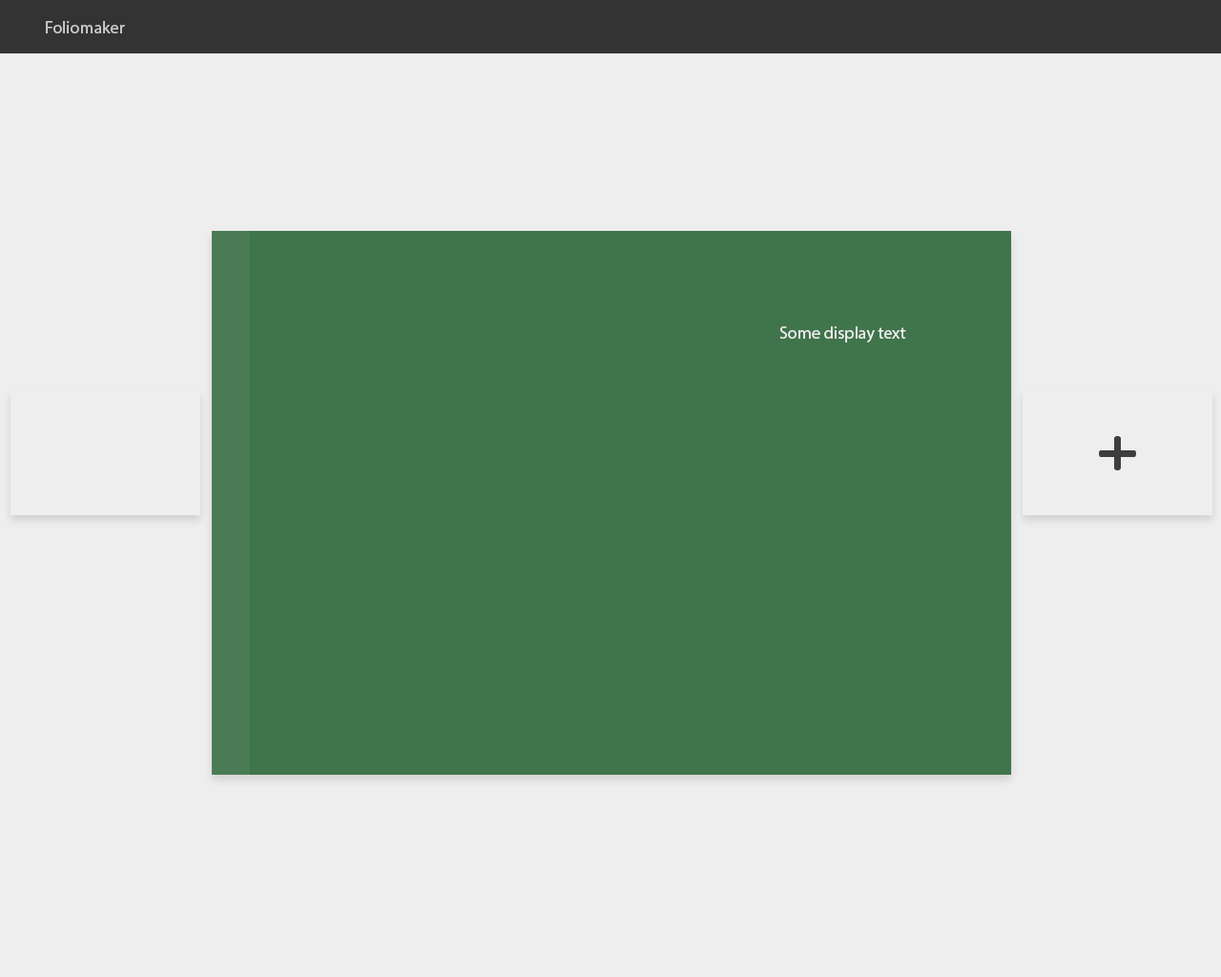
<style>
.page{position:relative;width:1221px;height:977px;background:#eeeeee}
.page>*{position:absolute;margin:0}
.t1{font:17.2px "MyriadPro-Regular";color:#cccccc}
.t2{font:17.2px "MyriadPro-Regular";color:#eeeeee}
</style>
<div class="page">
<p class="t1" style="left:46px;top:21px;width:79px;height:12px">Foliomaker</p>
<p class="t2" style="left:779px;top:326px;width:127px;height:16px">Some display text</p>
</div>
